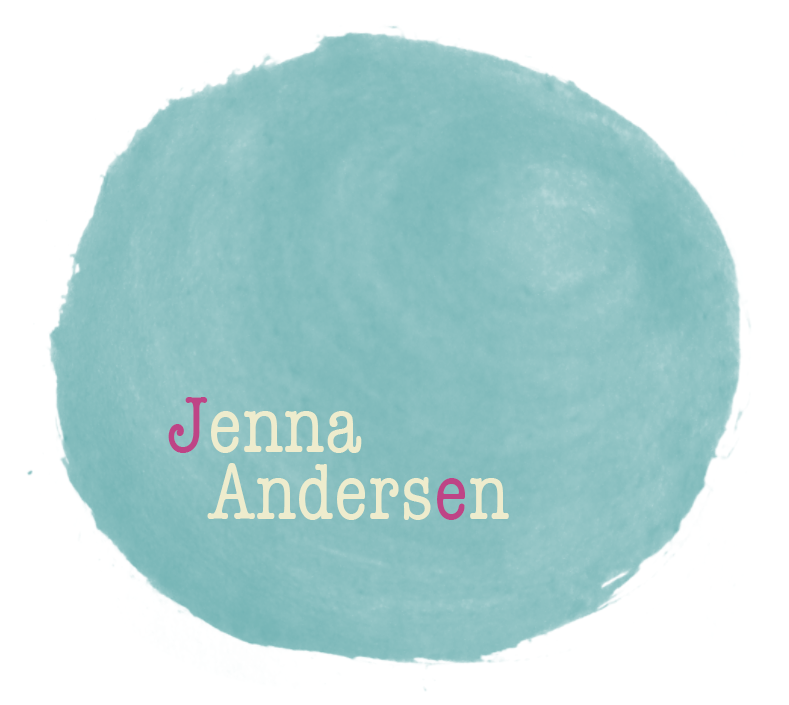
<style>
.page{position:relative;width:789px;height:705px;background:#ffffff}
.page>*{position:absolute;margin:0}
.t1{font:82.3px/67px "AmericanTypewriter-Condensed";color:#eeeccd}
.t2{font:82.3px/67px "AmericanTypewriter-Condensed";color:#be4486}
</style>
<div class="page">
<p class="t1" style="left:168px;top:397px;width:341px;height:123px"><span class="t2">J</span>enna<br>  Anders<span class="t2">e</span>n</p>
</div>
